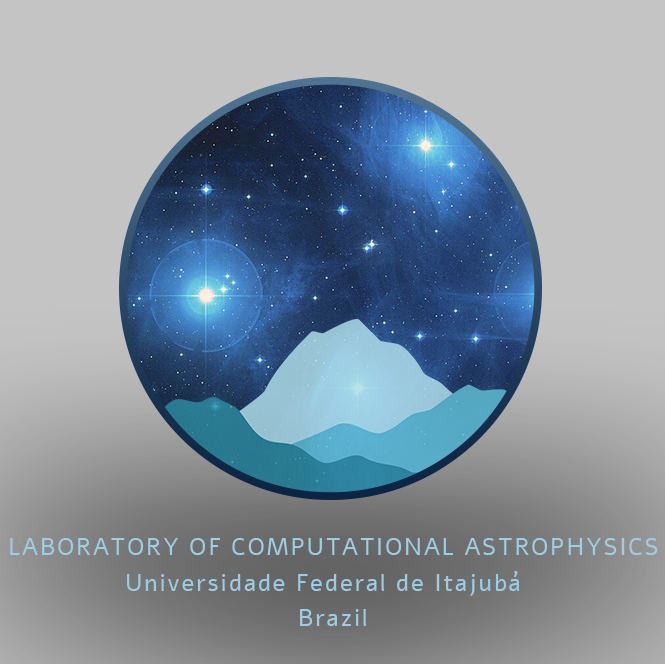
<style>
.page{position:relative;width:665px;height:664px;background:#c4c4c5}
.page>*{position:absolute;margin:0}
.t1{font:24px "Alef-Regular";letter-spacing:0.075em;color:#9dcee3;text-transform:uppercase}
.t2{font:24px "Alef-Regular";letter-spacing:0.075em;color:#9ccce2}
.t3{font:24px "Alef-Regular";letter-spacing:0.075em;color:#9ccde3}
</style>
<div class="page">
<p class="t1" style="left:10px;top:538px;width:648px;height:17px">Laboratory of Computational Astrophysics</p>
<p class="t2" style="left:127px;top:571px;width:393px;height:25px">Universidade Federal de Itajubá</p>
<p class="t3" style="left:300px;top:609px;width:66px;height:17px">Brazil</p>
</div>
